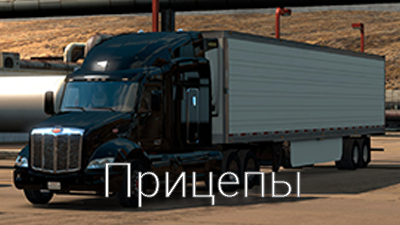
<style>
.page{position:relative;width:400px;height:225px}
.page>*{position:absolute;margin:0}
.t1{font:48px "Roboto-Light"}
</style>
<div class="page">
<p class="t1" style="left:105px;top:163px;width:195px;height:44px">Прицепы</p>
</div>
